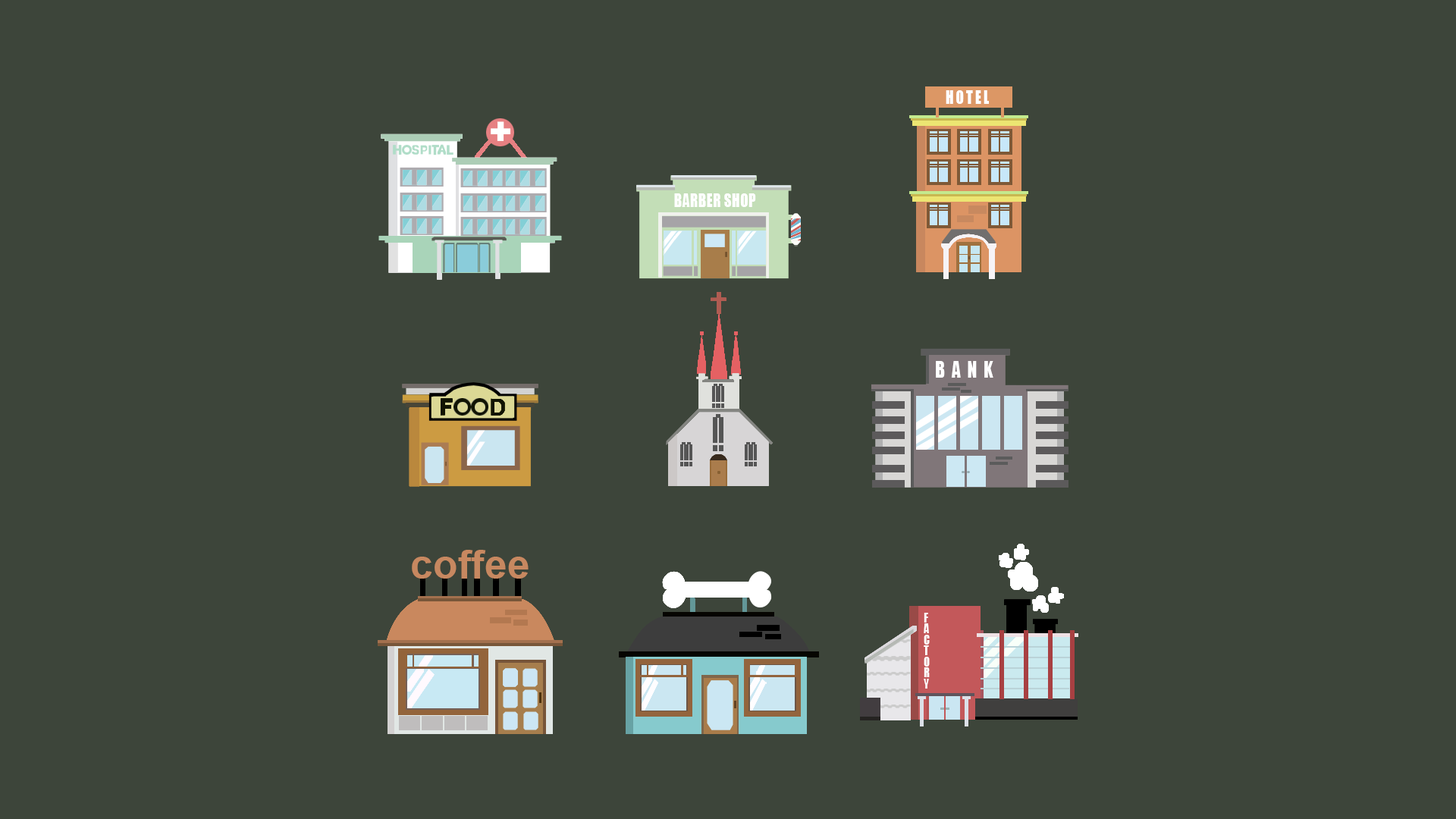
<style>
.page{position:relative;width:1456px;height:819px;background:#3d453a}
.page>*{position:absolute;margin:0}
.t1{font:17.2px "Impact";letter-spacing:0.18em;color:#ffffff;text-transform:uppercase;scale:0.82 1}
.t2{font:17.7px "Impact";letter-spacing:0.02em;color:#ffffff;text-transform:uppercase;scale:0.82 1}
.t3{font:21.5px "Impact";letter-spacing:0.38em;color:#ffffff;text-transform:uppercase;scale:0.82 1}
.t4{font:40.5px "Arial-BoldMT";color:#c78860}
.t5{font:12.4px/10.9px "Impact";color:#ffffff;text-transform:uppercase;scale:0.85 1}
</style>
<div class="page">
<p class="t1" style="left:946px;top:90px;width:43px;height:14px">HOTEL</p>
<p class="t2" style="left:674px;top:193px;width:82px;height:14px">BARBER SHOP</p>
<p class="t3" style="left:936px;top:361px;width:57px;height:17px">BANK</p>
<p class="t4" style="left:412px;top:550px;width:117px;height:29px">coffee</p>
<p class="t5" style="left:924px;top:613px;width:6px;height:76px">f<br>a<br>c<br>t<br>o<br>r<br>y</p>
</div>
